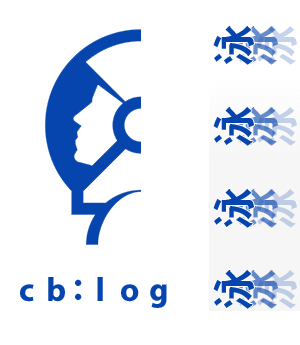
<style>
.page{position:relative;width:300px;height:345px;background:#ffffff}
.page>*{position:absolute;margin:0}
.t1{font:43.8px "AdobeGothicStd-Bold";color:#0645ad}
.t2{font:43.8px "AdobeGothicStd-Bold";color:#6289cb}
.t3{font:43.8px "AdobeGothicStd-Bold"}
.t4{font:43.8px "AdobeGothicStd-Bold";color:#6088c9}
.t5{font:43.8px "AdobeGothicStd-Bold";color:#5f86c8}
.t6{font:29.3px "KozGoPr6N-Heavy";color:#0645ad}
</style>
<div class="page">
<p class="t1" style="left:213px;top:25px;width:41px;height:40px;rotate:-90deg">泳</p>
<p class="t2" style="left:237px;top:25px;width:41px;height:40px;rotate:-90deg">泳</p>
<p class="t3" style="left:256px;top:25px;width:41px;height:40px;rotate:-90deg">泳</p>
<p class="t1" style="left:213px;top:106px;width:41px;height:40px;rotate:-90deg">泳</p>
<p class="t4" style="left:237px;top:106px;width:41px;height:40px;rotate:-90deg">泳</p>
<p class="t3" style="left:256px;top:106px;width:41px;height:40px;rotate:-90deg">泳</p>
<p class="t1" style="left:213px;top:188px;width:41px;height:40px;rotate:-90deg">泳</p>
<p class="t5" style="left:237px;top:188px;width:41px;height:40px;rotate:-90deg">泳</p>
<p class="t3" style="left:256px;top:188px;width:41px;height:40px;rotate:-90deg">泳</p>
<p class="t1" style="left:213px;top:269px;width:41px;height:40px;rotate:-90deg">泳</p>
<p class="t5" style="left:237px;top:269px;width:41px;height:40px;rotate:-90deg">泳</p>
<p class="t3" style="left:256px;top:269px;width:41px;height:40px;rotate:-90deg">泳</p>
<p class="t6" style="left:20px;top:277px;width:147px;height:31px">ｃｂ：ｌｏｇ</p>
</div>
